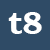
<style>
.page{position:relative;width:50px;height:50px;background:#2f4b66}
.page>*{position:absolute;margin:0}
.t1{font:32px "BookmanOldStyle-Bold";color:#ffffff}
</style>
<div class="page">
<p class="t1" style="left:8px;top:12px;width:34px;height:22px">t8</p>
</div>
